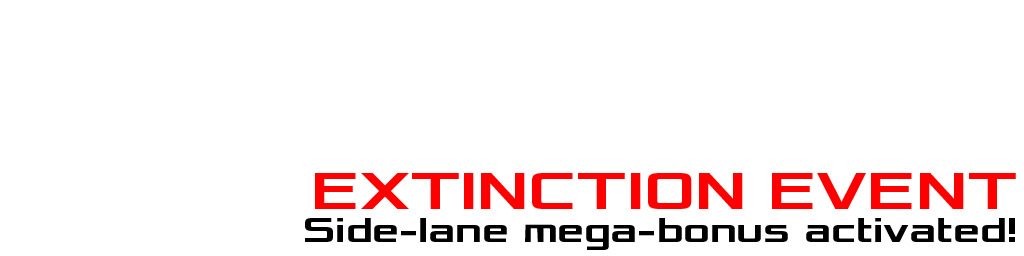
<style>
.page{position:relative;width:1024px;height:256px;background:#ffffff}
.page>*{position:absolute;margin:0}
.t1{font:55px "Xolonium-Bold";color:#ff0000}
.t2{font:36px "Xolonium-Bold";color:#000000}
</style>
<div class="page">
<p class="t1" style="left:315px;top:173px;width:701px;height:36px">EXTINCTION EVENT</p>
<p class="t2" style="left:305px;top:218px;width:710px;height:32px">Side-lane mega-bonus activated!</p>
</div>
